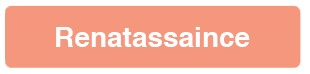
<style>
.page{position:relative;width:310px;height:74px;background:#f5977d}
.page>*{position:absolute;margin:0}
.t1{font:28px "Helvetica-Bold";color:#ffffff}
</style>
<div class="page">
<p class="t1" style="left:56px;top:27px;width:194px;height:20px">Renatassaince</p>
</div>
